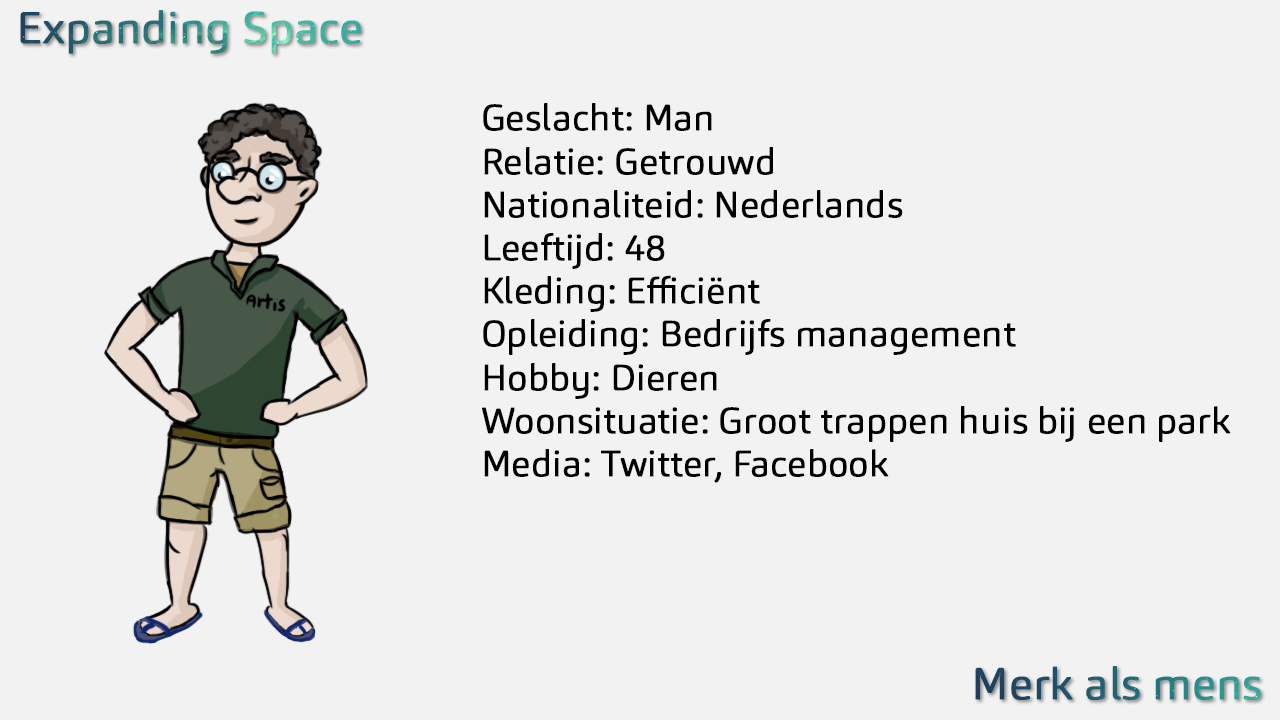
<style>
.page{position:relative;width:1280px;height:720px;background:#f2f2f2}
.page>*{position:absolute;margin:0}
.t1{font:44px "Carnas-Light";font-weight:bold}
.t2{font:36px "Carnas-Light";color:#000000;font-weight:bold}
</style>
<div class="page">
<p class="t1" style="left:20px;top:10px;width:341px;height:44px">Expanding Space</p>
<p class="t2" style="left:482px;top:103px;width:749px;height:380px">Geslacht: Man<br>Relatie: Getrouwd <br>Nationaliteid: Nederlands<br>Leeftijd: 48<br>Kleding: Efficiënt <br>Opleiding: Bedrijfs management   <br>Hobby: Dieren <br>Woonsituatie: Groot trappen huis bij een park<br>Media: Twitter, Facebook</p>
<p class="t1" style="left:975px;top:666px;width:286px;height:34px">Merk als mens</p>
</div>
